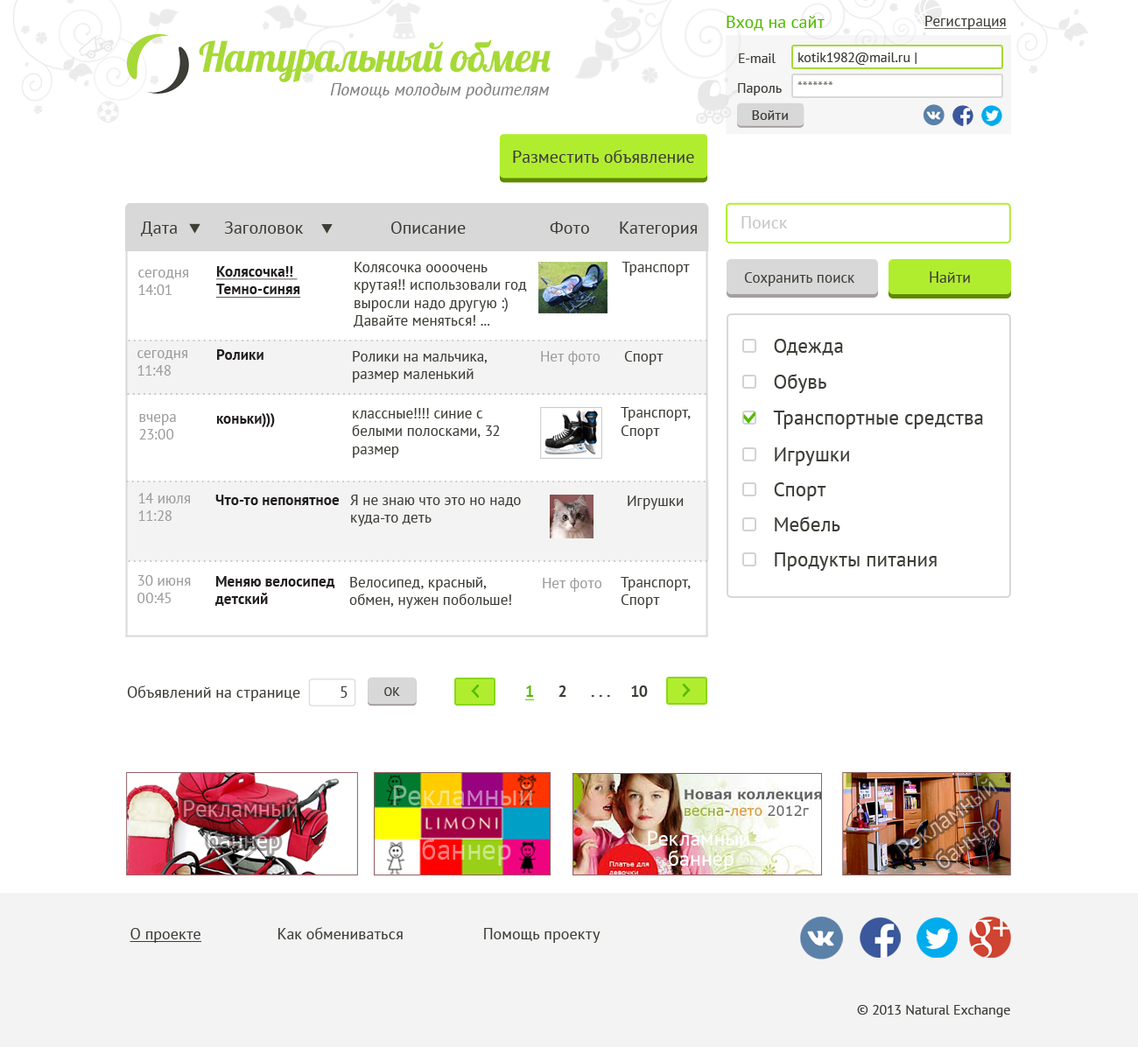
<style>
.page{position:relative;width:1138px;height:1047px;background:#ffffff}
.page>*{position:absolute;margin:0}
.t1{font:17.5px "PTSans-Regular";color:#53ba00}
.t2{font:14.9px "PTSans-Regular";color:#3e3e38;text-decoration:underline}
.t3{font:41.5px "Lobster";letter-spacing:-0.08em;color:#a6d937}
.t4{font:14px "PTSans-Regular";color:#3e3e38}
.t5{font:17.5px "PTSans-Italic";color:#7f7f7f}
.t6{font:14px "PTSans-Regular";color:#84847c}
.t7{font:17.5px "PTSans-Regular";color:#3e3e38}
.t8{font:17.5px "PTSans-Regular";color:#c7c6c6}
.t9{font:14.9px "PTSans-Regular";color:#9c9c9c}
.t10{font:14.9px "PTSans-Bold";color:#221e1f;text-decoration:underline}
.t11{font:14.9px "PTSans-Regular";color:#3e3e38}
.t12{font:15.8px "PTSans-Regular";color:#3e3e38}
.t13{font:12.3px "PTSans-Regular";letter-spacing:0.22em;color:#c4c4c4}
.t14{font:20.1px "PTSans-Regular";color:#3e3e38}
.t15{font:14.9px "PTSans-Bold";color:#221e1f}
.t16{font:15.8px "PTSans-Regular";color:#3d3d36}
.t17{font:12.4px "PTSans-Regular";color:#3e3e38}
.t18{font:15.8px "PTSans-Bold";color:#3e3e38}
.t19{font:15.8px "PTSans-Bold";color:#53ba00;text-decoration:underline}
.t20{font:23.7px/31.6px "PTSans-Regular"}
.t21{font:21px/20.1px "PTSans-Regular";color:#ffffff}
.t22{font:15.8px "PTSans-Regular";color:#3e3e38;text-decoration:underline}
</style>
<div class="page">
<p class="t1" style="left:727px;top:16px;width:98px;height:15px">Вход на сайт</p>
<p class="t2" style="left:925px;top:16px;width:82px;height:14px">Регистрация</p>
<p class="t3" style="left:199px;top:40px;width:352px;height:42px">Натуральный  обмен</p>
<p class="t4" style="left:739px;top:53px;width:37px;height:10px">E-mail</p>
<p class="t4" style="left:799px;top:53px;width:118px;height:12px">kotik1982@mail.ru |</p>
<p class="t5" style="left:330px;top:83px;width:220px;height:16px">Помощь молодым родителям</p>
<p class="t4" style="left:738px;top:83px;width:44px;height:12px">Пароль</p>
<p class="t6" style="left:798px;top:81px;width:36px;height:4px">*******</p>
<p class="t4" style="left:752px;top:110px;width:36px;height:10px">Войти</p>
<p class="t7" style="left:513px;top:150px;width:181px;height:13px">Разместить объявление</p>
<p class="t7" style="left:141px;top:222px;width:36px;height:14px">Дата</p>
<p class="t7" style="left:224px;top:222px;width:80px;height:12px">Заголовок</p>
<p class="t7" style="left:391px;top:222px;width:75px;height:12px">Описание</p>
<p class="t7" style="left:550px;top:222px;width:39px;height:12px">Фото</p>
<p class="t7" style="left:620px;top:222px;width:77px;height:15px">Категория</p>
<p class="t8" style="left:742px;top:216px;width:46px;height:13px">Поиск</p>
<p class="t9" style="left:138px;top:270px;width:50px;height:25px">сегодня<br>14:01</p>
<p class="t10" style="left:216px;top:266px;width:85px;height:32px">Колясочка!! <br>Темно-синяя</p>
<p class="t11" style="left:354px;top:262px;width:173px;height:66px">Колясочка оооочень крутая!! использовали год выросли надо другую :) Давайте меняться! ...</p>
<p class="t11" style="left:622px;top:262px;width:68px;height:14px">Транспорт</p>
<p class="t11" style="left:744px;top:272px;width:111px;height:14px">Сохранить поиск</p>
<p class="t12" style="left:930px;top:271px;width:40px;height:12px">Найти</p>
<p class="t13" style="left:128px;top:340px;width:580px;height:2px">............................................................................................................</p>
<p class="t14" style="left:774px;top:339px;width:69px;height:17px">Одежда</p>
<p class="t9" style="left:137px;top:350px;width:50px;height:26px">сегодня 11:48</p>
<p class="t15" style="left:217px;top:349px;width:47px;height:11px">Ролики</p>
<p class="t11" style="left:353px;top:351px;width:135px;height:32px">Ролики на мальчика, размер маленький</p>
<p class="t9" style="left:541px;top:351px;width:60px;height:14px">Нет фото</p>
<p class="t11" style="left:624px;top:351px;width:40px;height:14px">Спорт</p>
<p class="t14" style="left:774px;top:374px;width:53px;height:19px">Обувь</p>
<p class="t13" style="left:127px;top:393px;width:580px;height:2px">............................................................................................................</p>
<p class="t15" style="left:217px;top:413px;width:58px;height:14px">коньки)))</p>
<p class="t11" style="left:352px;top:408px;width:148px;height:50px">классные!!!! синие с белыми полосками, 32 размер</p>
<p class="t11" style="left:621px;top:407px;width:70px;height:33px">Транспорт,<br>Спорт</p>
<p class="t14" style="left:773px;top:411px;width:210px;height:18px">Транспортные средства</p>
<p class="t9" style="left:139px;top:414px;width:37px;height:26px">вчера 23:00</p>
<p class="t14" style="left:775px;top:448px;width:74px;height:18px">Игрушки</p>
<p class="t13" style="left:126px;top:481px;width:580px;height:2px">............................................................................................................</p>
<p class="t14" style="left:774px;top:483px;width:53px;height:18px">Спорт</p>
<p class="t9" style="left:138px;top:493px;width:52px;height:28px">14 июля 11:28</p>
<p class="t15" style="left:215px;top:495px;width:125px;height:10px">Что-то непонятное</p>
<p class="t11" style="left:350px;top:495px;width:171px;height:31px">Я не знаю что это но надо куда-то деть</p>
<p class="t11" style="left:628px;top:496px;width:56px;height:14px">Игрушки</p>
<p class="t14" style="left:775px;top:517px;width:66px;height:15px">Мебель</p>
<p class="t14" style="left:775px;top:553px;width:162px;height:18px">Продукты питания</p>
<p class="t13" style="left:128px;top:560px;width:580px;height:2px">............................................................................................................</p>
<p class="t9" style="left:137px;top:575px;width:54px;height:28px">30 июня 00:45</p>
<p class="t15" style="left:215px;top:576px;width:120px;height:30px">Меняю велосипед детский</p>
<p class="t11" style="left:349px;top:577px;width:162px;height:32px">Велосипед, красный, обмен, нужен побольше!</p>
<p class="t9" style="left:543px;top:578px;width:60px;height:14px">Нет фото</p>
<p class="t11" style="left:621px;top:577px;width:70px;height:32px">Транспорт,<br>Спорт</p>
<p class="t16" style="left:127px;top:686px;width:173px;height:15px">Объявлений на странице</p>
<p class="t12" style="left:341px;top:687px;width:7px;height:11px">5</p>
<p class="t17" style="left:384px;top:687px;width:16px;height:9px">ОК</p>
<p class="t18" style="left:525px;top:686px;width:123px;height:15px"><span class="t19">1</span>      2      . . .     10</p>
<p class="t20" style="left:896px;top:779px;width:104px;height:90px;text-align:center;rotate:-36deg">Рекламный <br>баннер</p>
<p class="t21" style="left:648px;top:831px;width:102px;height:39px;text-align:center">Рекламный <br>баннер</p>
<p class="t12" style="left:130px;top:927px;width:471px;height:16px"><span class="t22">О проекте</span>       Как обмениваться            Помощь  проекту</p>
<p class="t4" style="left:857px;top:1005px;width:154px;height:13px">© 2013 Natural Exchange</p>
</div>
